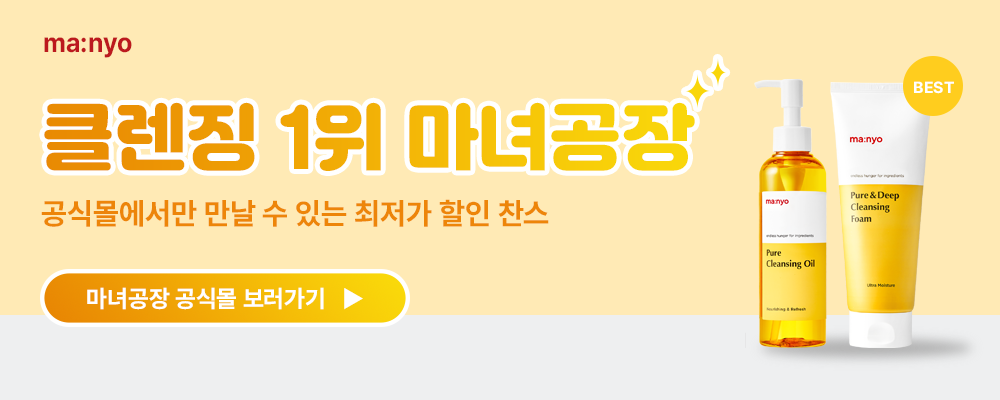
<style>
.page{position:relative;width:1000px;height:400px;background:#ffeab5}
.page>*{position:absolute;margin:0}
.t1{font:27.2px "Pretendard-Bold";color:#bc191e;scale:0.96 1}
.t2{font:16px "Pretendard-Bold";color:#ffffff}
.t3{font:72px "Jalnan2TTF"}
.t4{font:30px "Pretendard-Bold";color:#ed8509}
.t5{font:24px "Pretendard-Bold";color:#ffffff}
</style>
<div class="page">
<p class="t1" style="left:44px;top:37px;width:88px;height:21px">ma:nyo</p>
<p class="t2" style="left:914px;top:81px;width:40px;height:13px">BEST</p>
<p class="t3" style="left:44px;top:102px;width:651px;height:69px">클렌징 1위 마녀공장</p>
<p class="t4" style="left:41px;top:199px;width:508px;height:28px">공식몰에서만 만날 수 있는 최저가 할인 찬스</p>
<p class="t5" style="left:87px;top:287px;width:276px;height:23px">마녀공장 공식몰 보러가기   ▶</p>
</div>
